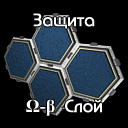
<style>
.page{position:relative;width:128px;height:128px;background:#000000}
.page>*{position:absolute;margin:0}
.t1{font:18px "BauhausC-Medium";color:#ffffff;font-weight:bold}
.t2{font:18px "TimesNewRomanPS-BoldMT";color:#ffffff}
</style>
<div class="page">
<p class="t1" style="left:33px;top:13px;width:62px;height:16px">Защита</p>
<p class="t1" style="left:26px;top:99px;width:76px;height:17px"><span class="t2">Ω-β </span>Слой</p>
</div>
